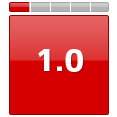
<style>
.page{position:relative;width:117px;height:117px;background:#d40000}
.page>*{position:absolute;margin:0}
.t1{font:36px "Colaborate-Bold";color:#ffffff;text-transform:uppercase}
</style>
<div class="page">
<p class="t1" style="left:38px;top:49px;width:45px;height:23px">1.0</p>
</div>
